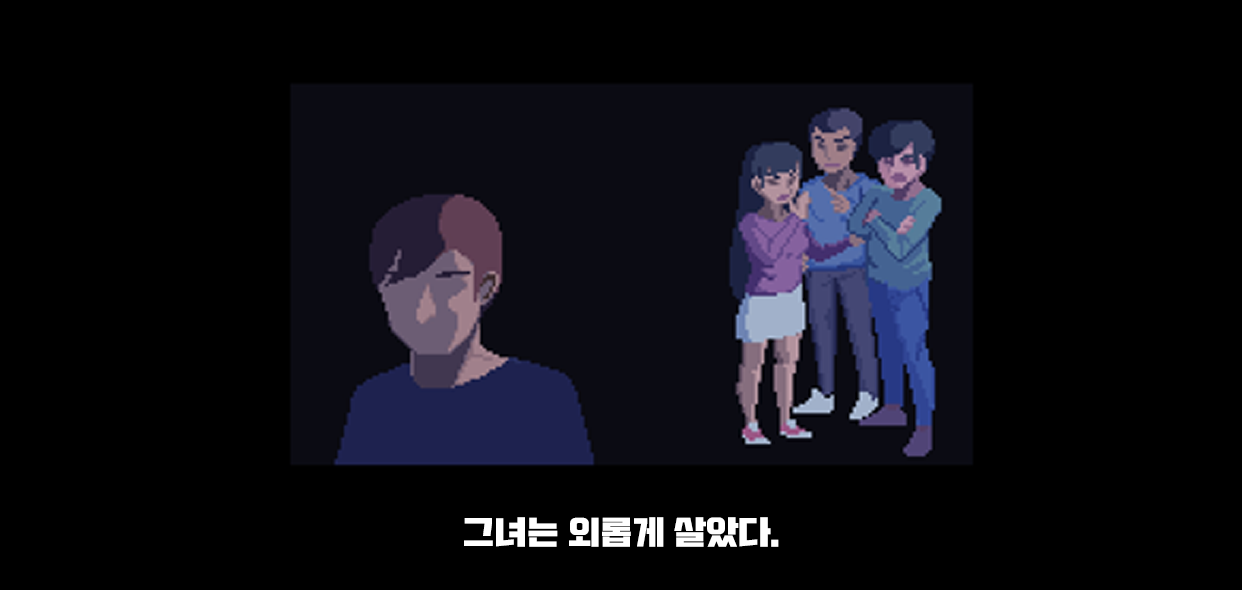
<style>
.page{position:relative;width:1242px;height:590px;background:#000000}
.page>*{position:absolute;margin:0}
.t1{font:33.3px "Typo_SsangmunDong_B";letter-spacing:-0.033em;color:#ffffff}
</style>
<div class="page">
<p class="t1" style="left:464px;top:517px;width:315px;height:30px">그녀는 외롭게 살았다.</p>
</div>
